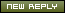
<style>
.page{position:relative;width:65px;height:13px}
.page>*{position:absolute;margin:0}
.t1{font:7px "BitDustTwo";color:#ffffff}
</style>
<div class="page">
<p class="t1" style="left:7px;top:4px;width:50px;height:5px">NEW REPLY</p>
</div>
